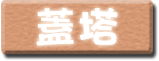
<style>
.page{position:relative;width:159px;height:61px}
.page>*{position:absolute;margin:0}
.t1{font:41.7px "DFHaiBao-W9-WINP-BF";letter-spacing:0.05em;color:#ffffff}
</style>
<div class="page">
<p class="t1" style="left:36px;top:7px;width:82px;height:39px">蓋塔</p>
</div>
